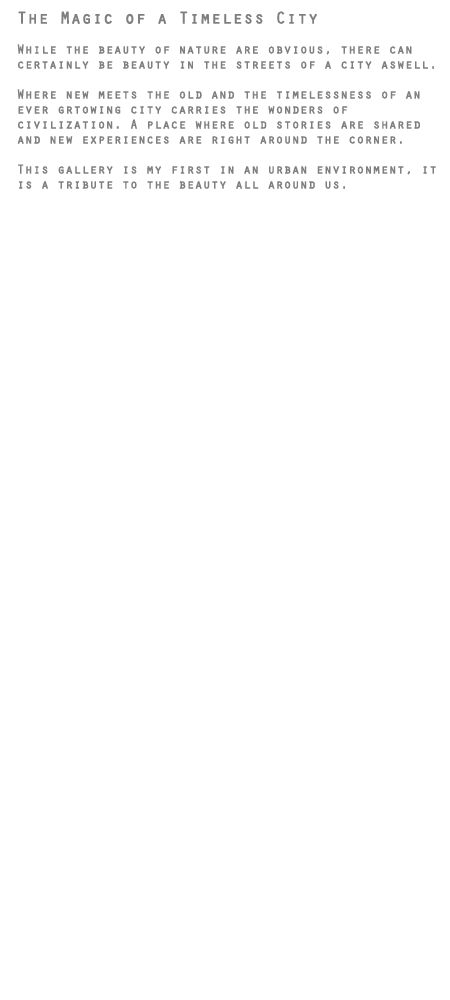
<style>
.page{position:relative;width:450px;height:1000px;background:#ffffff}
.page>*{position:absolute;margin:0}
.t1{font:12.5px "Orator-Regular";color:#7f7f7f;font-weight:bold}
.t2{font:16.7px "Orator-Regular";color:#7f7f7f;font-weight:bold}
</style>
<div class="page">
<p class="t1" style="left:17px;top:11px;width:419px;height:178px;text-align:right"><span class="t2">The Magic of a Timeless City<br></span><br>While the beauty of nature are obvious, there can <br>certainly be beauty in the streets of a city aswell. <br><br>Where new meets the old and the timelessness of an <br>ever grtowing city carries the wonders of <br>civilization. A place where old stories are shared <br>and new experiences are right around the corner.<br><br>This gallery is my first in an urban environment, it <br>is a tribute to the beauty all around us.</p>
</div>
